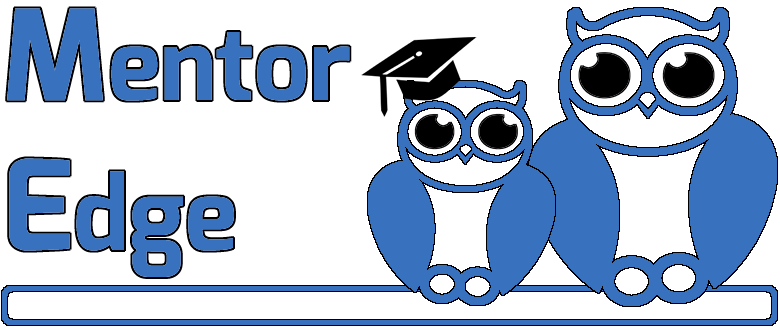
<style>
.page{position:relative;width:780px;height:330px;background:#ffffff}
.page>*{position:absolute;margin:0}
.t1{font:100px "Exo-Bold";color:#3872bf}
.t2{font:125px "Exo-Bold";color:#3872bf}
</style>
<div class="page">
<p class="t1" style="left:7px;top:8px;width:343px;height:269px"><span class="t2">M</span>entor<br><span class="t2">E</span>dge</p>
</div>
